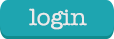
<style>
.page{position:relative;width:114px;height:39px;background:#1ea5b0}
.page>*{position:absolute;margin:0}
.t1{font:24px "AmerTypewriterITCbyBT-Medium";letter-spacing:-0.01em;color:#eaeaea}
</style>
<div class="page">
<p class="t1" style="left:29px;top:8px;width:58px;height:22px">login</p>
</div>
